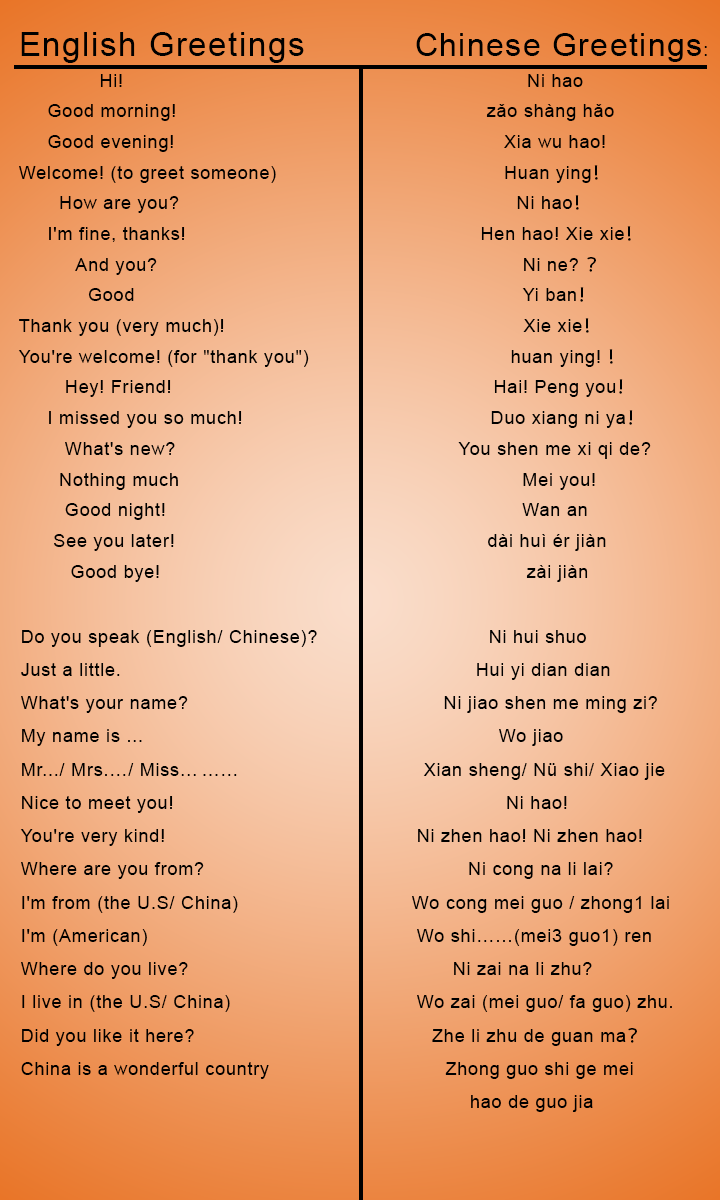
<style>
.page{position:relative;width:720px;height:1200px}
.page>*{position:absolute;margin:0}
.t1{font:18.1px/30.7px "ArialMT";letter-spacing:0.04em;color:#000000}
.t2{font:33.5px "ArialMT";letter-spacing:0.04em;color:#000000}
.t3{font:32.2px "ArialMT";letter-spacing:0.04em;color:#000000}
.t4{font:18.1px "ArialMT";letter-spacing:0.04em;color:#000000}
.t5{font:18.1px/30.7px "KozGoPr6N-Regular";letter-spacing:0.04em;color:#000000}
.t6{font:18.1px/33.2px "ArialMT";letter-spacing:0.04em;color:#000000}
.t7{font:18.1px/33.2px "KozGoPr6N-Regular";letter-spacing:0.04em;color:#000000}
</style>
<div class="page">
<p class="t1" style="left:18px;top:32px;width:689px;height:550px"><span class="t2">English Greetings    </span><span class="t3">Chinese Greetings</span><span class="t4">:<br></span>              Hi!                  Ni hao<br>     Good morning!         zǎo shàng hǎo<br>     Good evening!            Xia wu hao!<br>Welcome! (to greet someone)         Huan ying<span class="t5">！</span><br>       How are you?                                                        Ni hao<span class="t5">！</span><br>     I'm fine, thanks!                                                   Hen hao! Xie xie<span class="t5">！</span><br>          And you?           Ni ne? <span class="t5">？</span><br>            Good           Yi ban<span class="t5">！</span><br>Thank you (very much)!                                                Xie xie<span class="t5">！</span><br>You're welcome! (for "thank you")                              huan ying! <span class="t5">！</span><br>        Hey! Friend!                                                       Hai! Peng you<span class="t5">！</span><br>     I missed you so much!                                       Duo xiang ni ya<span class="t5">！</span><br>        What's new?                                              You shen me xi qi de? <br>       Nothing much                                                         Mei you! <br>        Good night!                                                         Wan an <br>      See you later!                                                  dài huì ér jiàn<br>         Good bye!                                                                zài jiàn</p>
<p class="t6" style="left:20px;top:630px;width:652px;height:482px">Do you speak (English/ Chinese)?     Ni hui shuo <br>Just a little.              Hui yi dian dian<br>What's your name?                                           Ni jiao shen me ming zi?<br>My name is ...                 Wo jiao<br>Mr.../ Mrs.…/ Miss… ……                                Xian sheng/ Nü shi/ Xiao jie<br>Nice to meet you!            Ni hao!<br>You're very kind!       Ni zhen hao! Ni zhen hao!<br>Where are you from?                                         Ni cong na li lai?<br>I'm from (the U.S/ China)                         Wo cong mei guo / zhong1 lai<br>I'm (American)        Wo shi……(mei3 guo1) ren<br>Where do you live?        Ni zai na li zhu?  <br>I live in (the U.S/ China)      Wo zai (mei guo/ fa guo) zhu.<br>Did you like it here?                                         Zhe li zhu de guan ma<span class="t7">？</span><br>China is a wonderful country                Zhong guo shi ge mei <br>               hao de guo jia</p>
</div>
